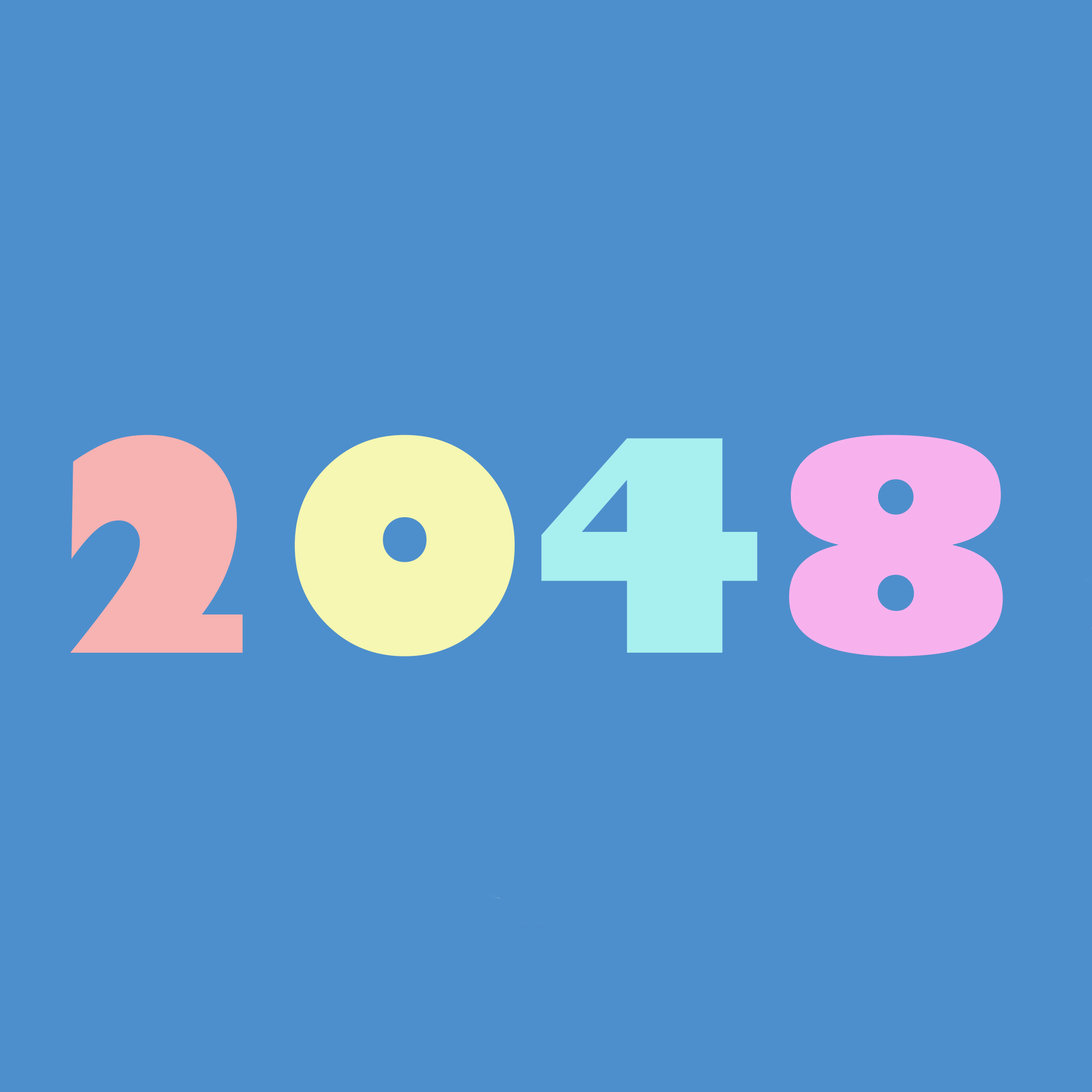
<style>
.page{position:relative;width:1092px;height:1092px;background:#4d8fcc}
.page>*{position:absolute;margin:0}
.t1{font:287.6px "GillSans-UltraBold";color:#f7b2b2}
.t2{font:287.6px "GillSans-UltraBold";color:#f5f7b2}
.t3{font:287.6px "GillSans-UltraBold";color:#a8eff0}
.t4{font:287.6px "GillSans-UltraBold";color:#f7b2ee}
</style>
<div class="page">
<p class="t1" style="left:70px;top:435px;width:933px;height:221px">2<span class="t2">0</span><span class="t3">4</span><span class="t4">8</span></p>
</div>
